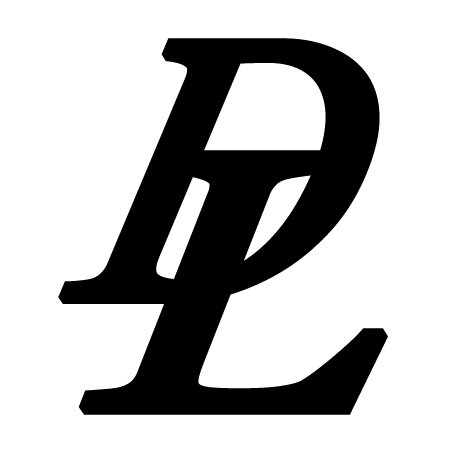
<style>
.page{position:relative;width:450px;height:450px;background:#ffffff}
.page>*{position:absolute;margin:0}
.t1{font:400.2px "Georgia";color:#000000;font-weight:bold;scale:0.92 1}
.t2{font:391.7px "Georgia";color:#000000;font-weight:bold;scale:1.23 1}
</style>
<div class="page">
<p class="t1" style="left:58px;top:38px;width:322px;height:266px">D</p>
<p class="t2" style="left:78px;top:150px;width:310px;height:265px">L</p>
</div>
